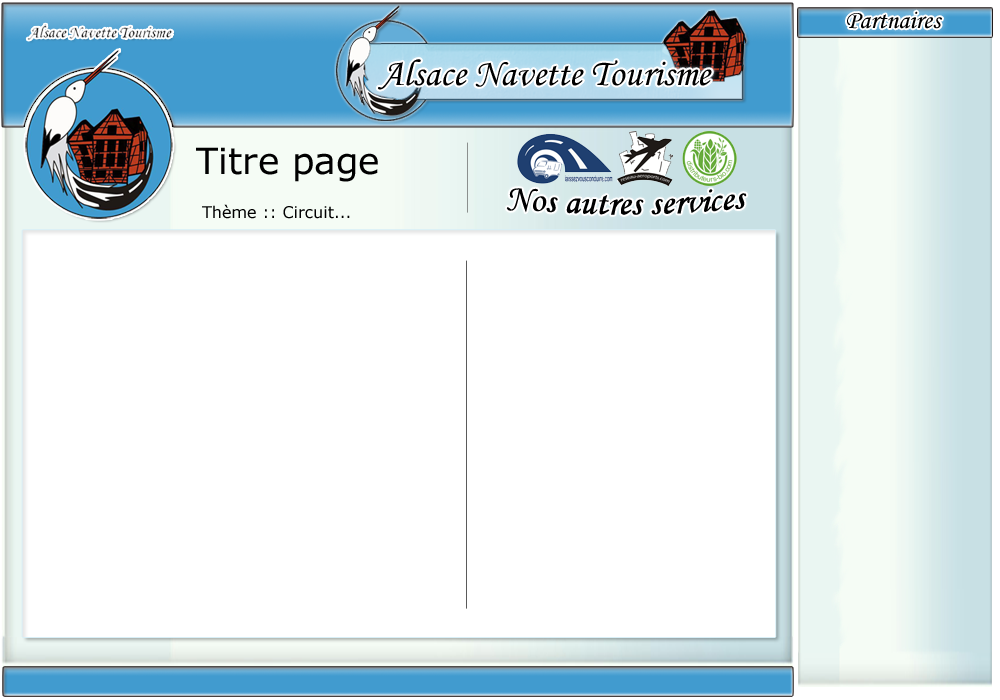
<style>
.page{position:relative;width:1000px;height:700px;background:#ffffff}
.page>*{position:absolute;margin:0}
.t1{font:26px "MonotypeCorsiva";color:#000000}
.t2{font:37.6px "MonotypeCorsiva";color:#000000}
.t3{font:36px "Verdana";color:#000000}
.t4{font:36px "MonotypeCorsiva";color:#000000}
.t5{font:16px "Verdana";color:#000000}
</style>
<div class="page">
<p class="t1" style="left:847px;top:11px;width:95px;height:18px">Partnaires</p>
<p class="t2" style="left:378px;top:59px;width:334px;height:31px">Alsace Navette Tourisme</p>
<p class="t3" style="left:196px;top:147px;width:182px;height:35px">Titre page</p>
<p class="t4" style="left:506px;top:188px;width:241px;height:27px">Nos autres services</p>
<p class="t5" style="left:202px;top:204px;width:148px;height:15px">Thème :: Circuit...</p>
</div>
